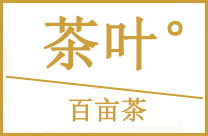
<style>
.page{position:relative;width:208px;height:136px;background:#ffffff}
.page>*{position:absolute;margin:0}
.t1{font:58px "SimSun";color:#cd9f36;font-weight:bold}
.t2{font:26px "SimSun";color:#cd9f36;font-weight:bold}
</style>
<div class="page">
<p class="t1" style="left:43px;top:15px;width:140px;height:56px">茶叶°</p>
<p class="t2" style="left:69px;top:97px;width:78px;height:25px">百亩茶</p>
</div>
